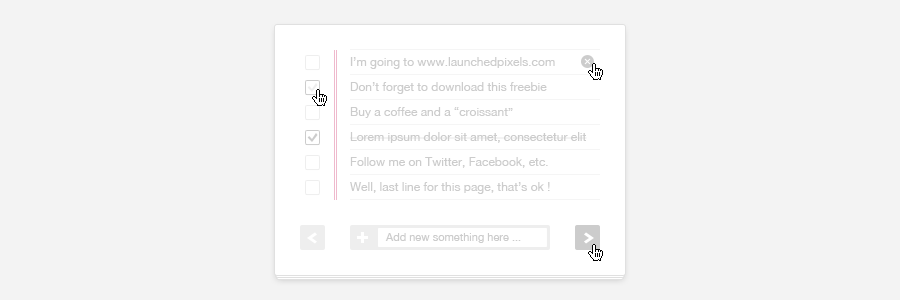
<style>
.page{position:relative;width:900px;height:300px;background:#f3f3f3}
.page>*{position:absolute;margin:0}
.t1{font:12px "HelveticaNeue";color:#cccccc}
.t2{font:11px "HelveticaNeue";color:#cccccc}
</style>
<div class="page">
<p class="t1" style="left:350px;top:57px;width:205px;height:12px">I’m going to www.launchedpixels.com</p>
<p class="t1" style="left:350px;top:82px;width:197px;height:12px">Don’t forget to download this freebie</p>
<p class="t1" style="left:350px;top:107px;width:163px;height:11px">Buy a coffee and a “croissant”</p>
<p class="t1" style="left:350px;top:132px;width:237px;height:11px">Lorem ipsum dolor sit amet, consectetur elit</p>
<p class="t1" style="left:350px;top:157px;width:198px;height:11px">Follow me on Twitter, Facebook, etc.</p>
<p class="t1" style="left:350px;top:182px;width:200px;height:12px">Well, last line for this page, that’s ok !</p>
<p class="t2" style="left:385px;top:233px;width:136px;height:10px">Add new something here ...</p>
</div>
